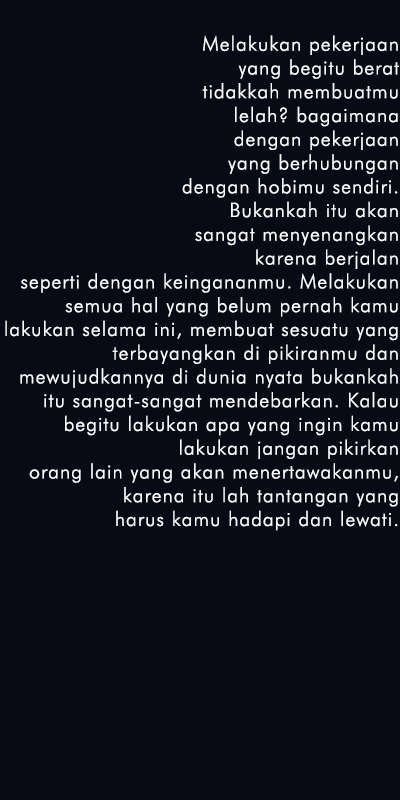
<style>
.page{position:relative;width:400px;height:800px;background:#080a16}
.page>*{position:absolute;margin:0}
.t1{font:19.8px "FuturaBT-Light";letter-spacing:0.05em;color:#fefeff}
</style>
<div class="page">
<p class="t1" style="left:5px;top:35px;width:394px;height:496px;text-align:right">Melakukan pekerjaan<br>yang begitu berat<br>tidakkah membuatmu<br>lelah? bagaimana<br>dengan pekerjaan<br>yang berhubungan<br>dengan hobimu sendiri.<br>Bukankah itu akan<br>sangat menyenangkan<br>karena berjalan<br>seperti dengan keingananmu. Melakukan<br>semua hal yang belum pernah kamu<br>lakukan selama ini, membuat sesuatu yang<br>terbayangkan di pikiranmu dan<br>mewujudkannya di dunia nyata bukankah<br>itu sangat-sangat mendebarkan. Kalau<br>begitu lakukan apa yang ingin kamu<br>lakukan jangan pikirkan<br>orang lain yang akan menertawakanmu,<br>karena itu lah tantangan yang<br>harus kamu hadapi dan lewati.</p>
</div>
